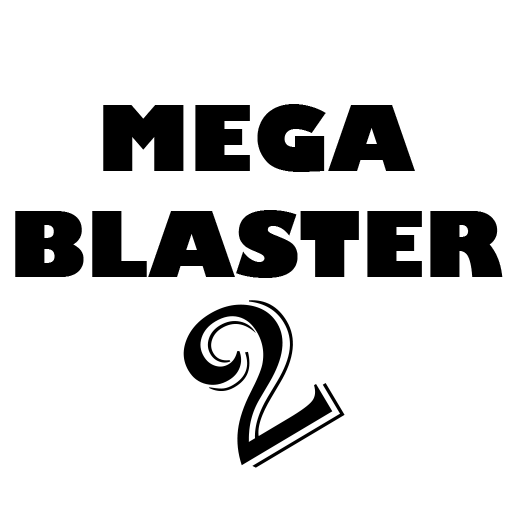
<style>
.page{position:relative;width:512px;height:512px;background:#ffffff}
.page>*{position:absolute;margin:0}
.t1{font:88px "GillSans-UltraBold";color:#000000}
.t2{font:231.8px "Algerian";color:#000000}
</style>
<div class="page">
<p class="t1" style="left:15px;top:104px;width:488px;height:174px;text-align:center">MEGA<br>BLASTER</p>
<p class="t2" style="left:183px;top:300px;width:162px;height:168px;rotate:-31deg">2</p>
</div>
